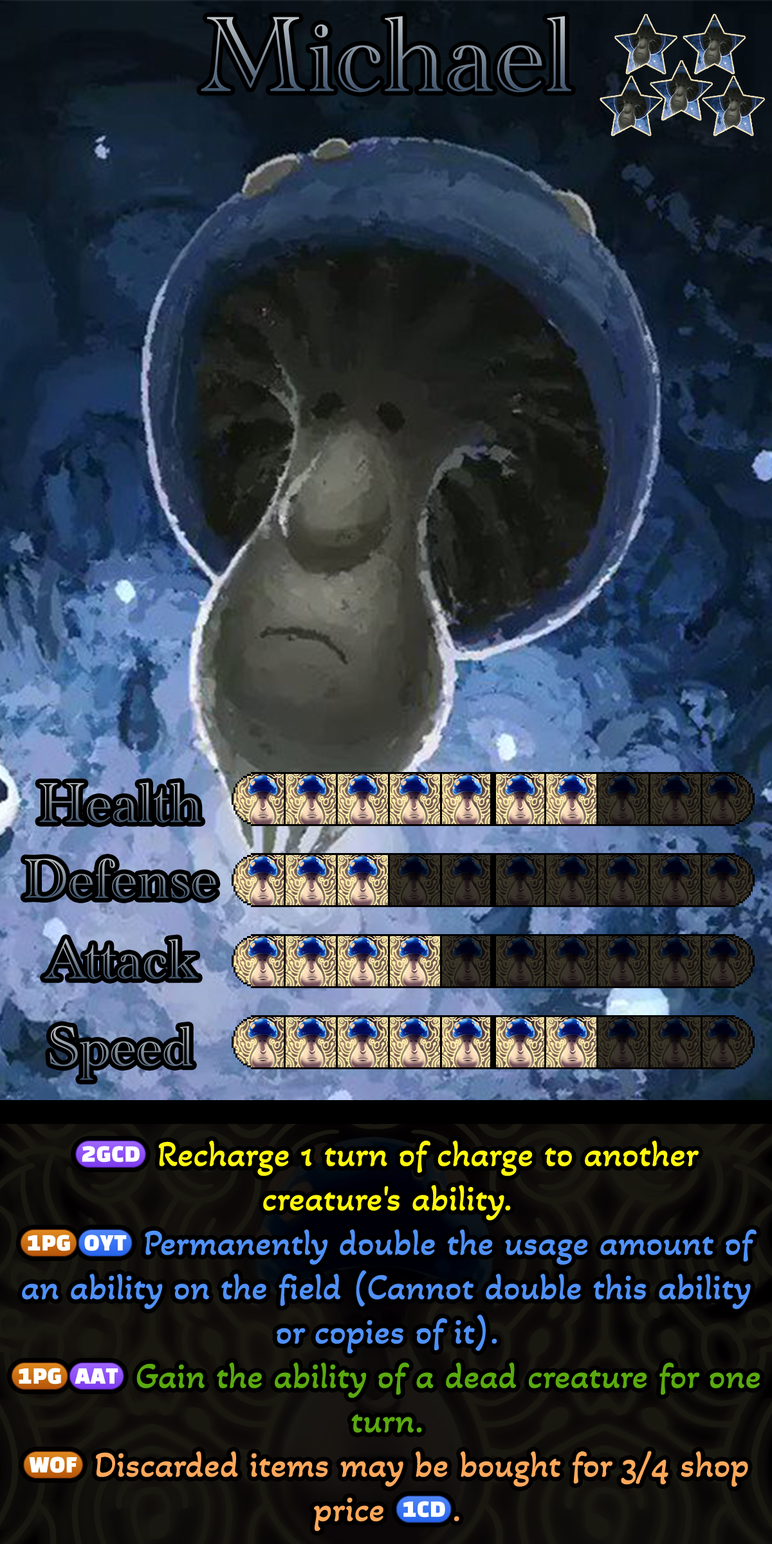
<style>
.page{position:relative;width:772px;height:1544px}
.page>*{position:absolute;margin:0}
.t1{font:189.8px "AcademyEngravedLetPlain"}
.t2{font:99.7px "AcademyEngravedLetPlain"}
.t3{font:63.1px/44.4px "AkayaTelivigala-Regular";color:#5091f8}
.t4{font:27.8px/44.4px "stoogedings-Regular";color:#fff60d}
.t5{font:63.1px/44.4px "AkayaTelivigala-Regular";color:#fff60d}
.t6{font:47.7px/44.4px "stoogedings-Regular";color:#5091f8}
.t7{font:47.7px/44.4px "stoogedings-Regular";color:#5aaa0f}
.t8{font:63.1px/44.4px "AkayaTelivigala-Regular";color:#5aaa0f}
.t9{font:47.7px/44.4px "stoogedings-Regular";color:#ffa85b}
.t10{font:63.1px/44.4px "AkayaTelivigala-Regular";color:#ffa85b}
</style>
<div class="page">
<p class="t1" style="left:201px;top:16px;width:370px;height:77px">Michael</p>
<p class="t2" style="left:39px;top:782px;width:162px;height:41px">Health</p>
<p class="t2" style="left:50px;top:1026px;width:142px;height:54px">Speed</p>
<p class="t3" style="left:11px;top:1140px;width:749px;height:391px;text-align:center"><span class="t4">(2GCD)</span><span class="t5"> Recharge 1 turn of charge to another creature's ability.<br></span><span class="t6">(1PG)(OYT)</span> Permanently double the usage amount of an ability on the field (Cannot double this ability or copies of it).<br><span class="t7">(1PG)(AAT)</span><span class="t8"> Gain the ability of a dead creature for one turn.<br></span><span class="t9">(WOF)</span><span class="t10"> Discarded items may be bought for 3/4 shop price </span><span class="t9">(1CD)</span><span class="t10">.</span></p>
</div>
